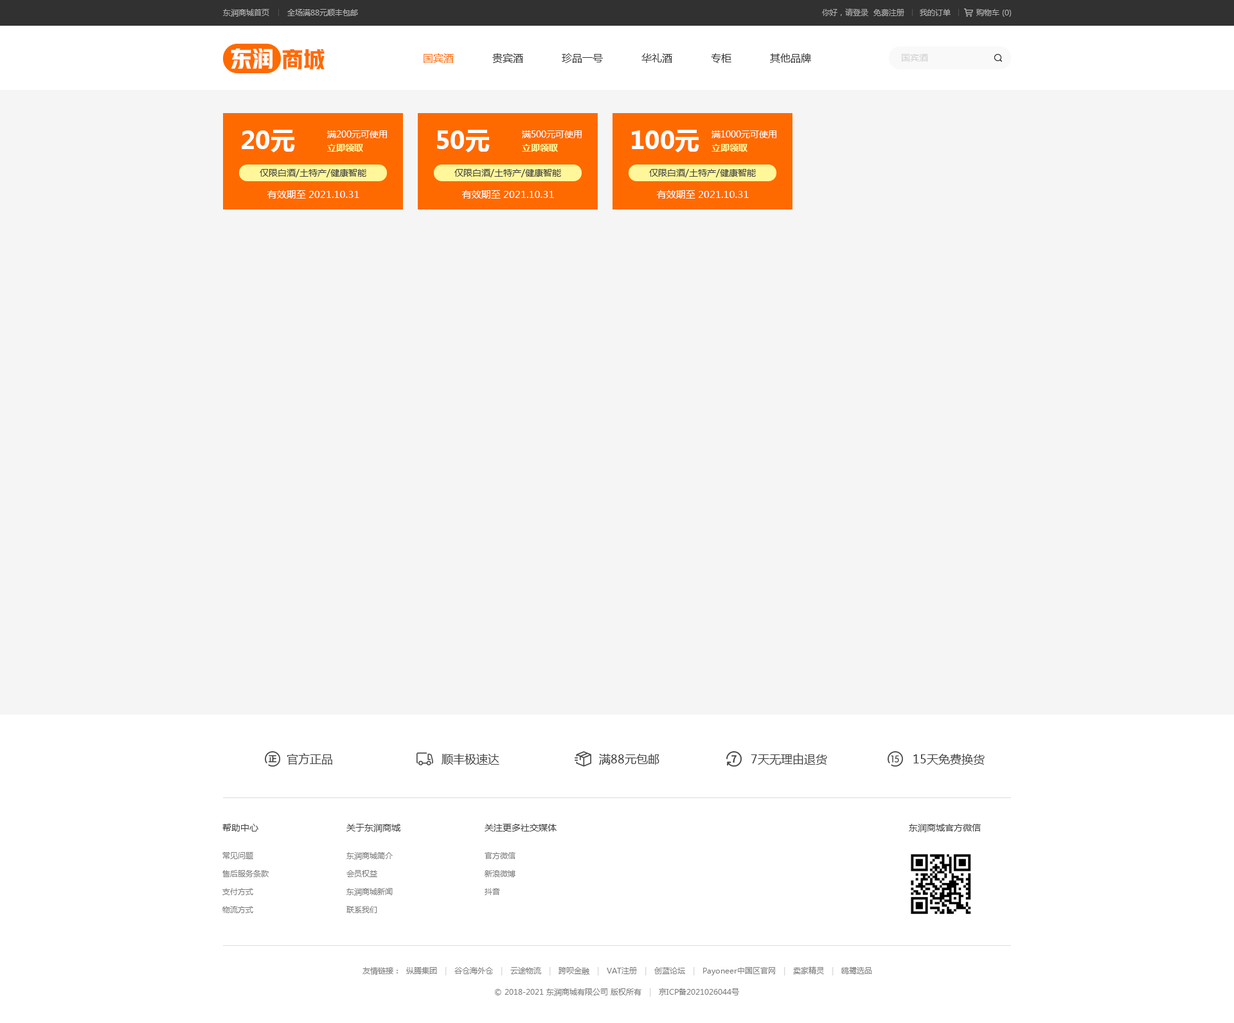
<style>
.page{position:relative;width:1234px;height:1023px;background:#f5f5f5}
.page>*{position:absolute;margin:0}
.t1{font:7.7px "MicrosoftYaHei";color:#b0b0b0}
.t2{font:7.7px "MicrosoftYaHei";color:#acacac}
.t3{font:21.9px "HYYakuHei-HEW";color:#ffffff}
.t4{font:21.9px "HYYakuHei-HEW";color:#ff6a00}
.t5{font:10.3px "MicrosoftYaHei";color:#333333}
.t6{font:10.3px "MicrosoftYaHei";color:#ff6a00}
.t7{font:9px "MicrosoftYaHei";color:#d2d2d2}
.t8{font:24.4px "MicrosoftYaHei-Bold";color:#ffffff}
.t9{font:9px/15.4px "MicrosoftYaHei";color:#ffffff}
.t10{font:9px/15.4px "MicrosoftYaHei-Bold";color:#fff799}
.t11{font:9px "MicrosoftYaHei";color:#434343}
.t12{font:9.6px "MicrosoftYaHei";color:#ffffff}
.t13{font:11.6px "MicrosoftYaHei";color:#434343}
.t14{font:7.7px/18px "MicrosoftYaHei";color:#7d7d7d}
.t15{font:7.7px "MicrosoftYaHei";color:#7d7d7d}
.t16{font:7.7px "MicrosoftYaHei";color:#d2d2d2}
</style>
<div class="page">
<p class="t1" style="left:223px;top:9px;width:135px;height:8px">东润商城首页       全场满88元顺丰包邮</p>
<p class="t2" style="left:822px;top:8px;width:190px;height:9px">你好，请登录  免费注册      我的订单          购物车 (0)</p>
<p class="t3" style="left:231px;top:48px;width:42px;height:21px">东润</p>
<p class="t4" style="left:282px;top:49px;width:43px;height:20px">商城</p>
<p class="t5" style="left:424px;top:53px;width:387px;height:10px"><span class="t6">国宾酒</span>            贵宾酒            珍品一号            华礼酒            专柜            其他品牌</p>
<p class="t7" style="left:902px;top:54px;width:26px;height:8px">国宾酒</p>
<p class="t8" style="left:242px;top:130px;width:53px;height:22px">20元</p>
<p class="t9" style="left:327px;top:130px;width:60px;height:22px">满200元可使用<br><span class="t10">立即领取</span></p>
<p class="t8" style="left:437px;top:130px;width:53px;height:22px">50元</p>
<p class="t9" style="left:522px;top:130px;width:60px;height:22px">满500元可使用<br><span class="t10">立即领取</span></p>
<p class="t8" style="left:632px;top:130px;width:67px;height:22px">100元</p>
<p class="t9" style="left:712px;top:130px;width:65px;height:22px">满1000元可使用<br><span class="t10">立即领取</span></p>
<p class="t11" style="left:260px;top:169px;width:106px;height:8px">仅限白酒/土特产/健康智能</p>
<p class="t11" style="left:455px;top:169px;width:106px;height:8px">仅限白酒/土特产/健康智能</p>
<p class="t11" style="left:649px;top:169px;width:107px;height:8px">仅限白酒/土特产/健康智能</p>
<p class="t12" style="left:267px;top:190px;width:92px;height:9px">有效期至 2021.10.31</p>
<p class="t12" style="left:462px;top:190px;width:92px;height:9px">有效期至 2021.10.31</p>
<p class="t12" style="left:657px;top:190px;width:92px;height:9px">有效期至 2021.10.31</p>
<p class="t13" style="left:287px;top:753px;width:45px;height:12px">官方正品</p>
<p class="t13" style="left:442px;top:754px;width:58px;height:11px">顺丰极速达</p>
<p class="t13" style="left:599px;top:754px;width:61px;height:11px">满88元包邮</p>
<p class="t13" style="left:751px;top:753px;width:76px;height:12px">7天无理由退货</p>
<p class="t13" style="left:914px;top:754px;width:71px;height:11px">15天免费换货</p>
<p class="t11" style="left:222px;top:824px;width:36px;height:8px">帮助中心</p>
<p class="t11" style="left:346px;top:824px;width:55px;height:9px">关于东润商城</p>
<p class="t11" style="left:485px;top:824px;width:72px;height:8px">关注更多社交媒体</p>
<p class="t11" style="left:909px;top:824px;width:72px;height:9px">东润商城官方微信</p>
<p class="t14" style="left:222px;top:852px;width:47px;height:62px">常见问题<br>售后服务条款<br>支付方式<br>物流方式</p>
<p class="t14" style="left:346px;top:852px;width:47px;height:62px">东润商城简介<br>会员权益<br>东润商城新闻<br>联系我们</p>
<p class="t14" style="left:485px;top:852px;width:31px;height:44px">官方微信<br>新浪微博<br>抖音</p>
<p class="t15" style="left:363px;top:967px;width:509px;height:9px">友情链接：  纵腾集团   <span class="t16">|   </span>谷仓海外仓   <span class="t16">|   </span>云途物流   <span class="t16">|   </span>跨呗金融   <span class="t16">|   </span>VAT注册   <span class="t16">|   </span>创蓝论坛   <span class="t16">|   </span>Payoneer中国区官网   <span class="t16">|   </span>卖家精灵   <span class="t16">|   </span>鸥鹭选品</p>
<p class="t15" style="left:495px;top:989px;width:244px;height:8px">© 2018-2021 东润商城有限公司 版权所有   <span class="t16">|   </span>京ICP备2021026044号</p>
</div>
